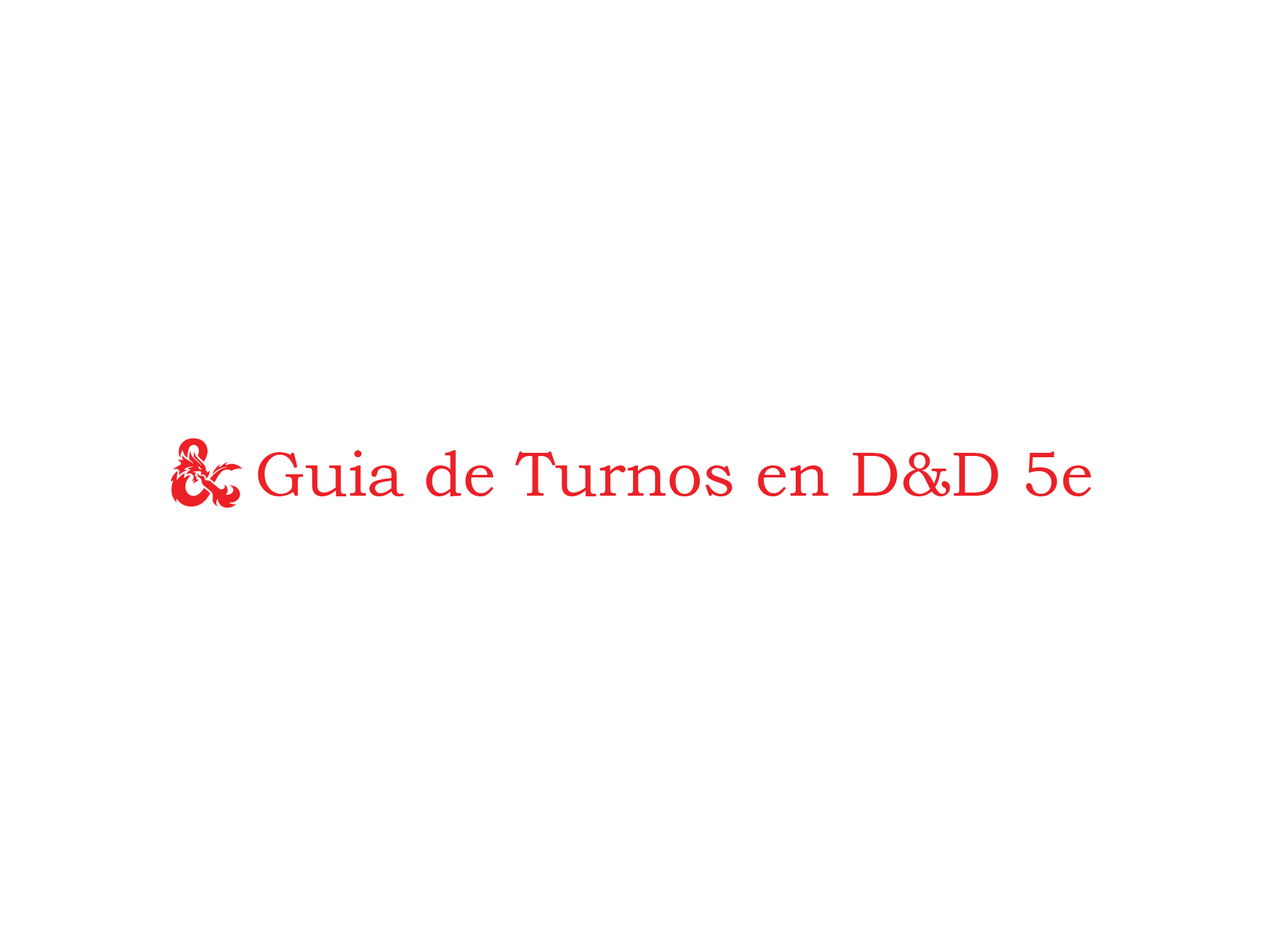
<style>
.page{position:relative;width:1261px;height:946px;background:#ffffff}
.page>*{position:absolute;margin:0}
.t1{font:63px "BookmanOldStyle";color:#ec2127}
</style>
<div class="page">
<p class="t1" style="left:258px;top:450px;width:833px;height:46px">Guia de Turnos en D&amp;D 5e</p>
</div>
